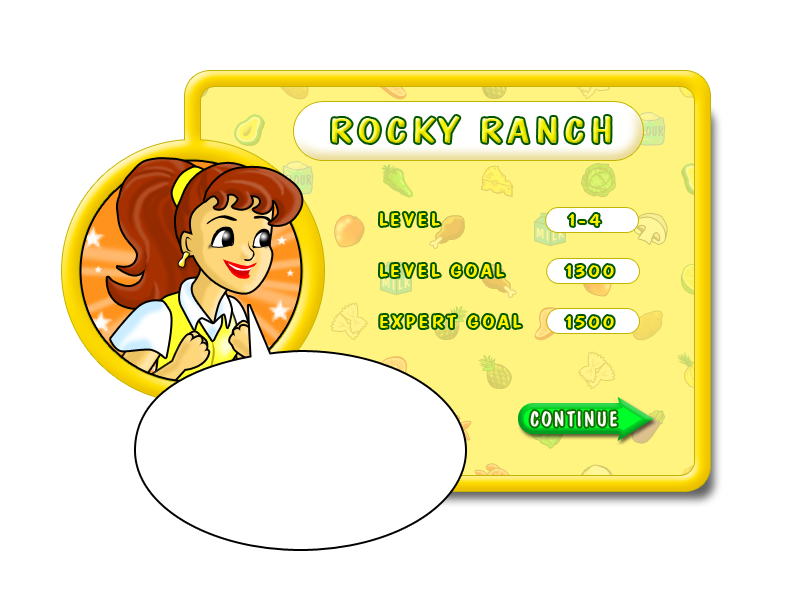
<style>
.page{position:relative;width:800px;height:600px;background:#ffffff}
.page>*{position:absolute;margin:0}
.t1{font:36.3px "DomCasualBT-Regular";letter-spacing:0.095em;scale:1.32 1}
.t2{font:19.2px/51px "DomCasualBT-Regular";letter-spacing:0.095em;color:#fff000;scale:1.32 1}
</style>
<div class="page">
<p class="t1" style="left:332px;top:116px;width:279px;height:27px">ROCKY RANCH</p>
<p class="t2" style="left:380px;top:213px;width:234px;height:115px">LEVEL               1-4<br>LEVEL GOAL       1300<br>EXPERT GOAL     1500</p>
</div>
